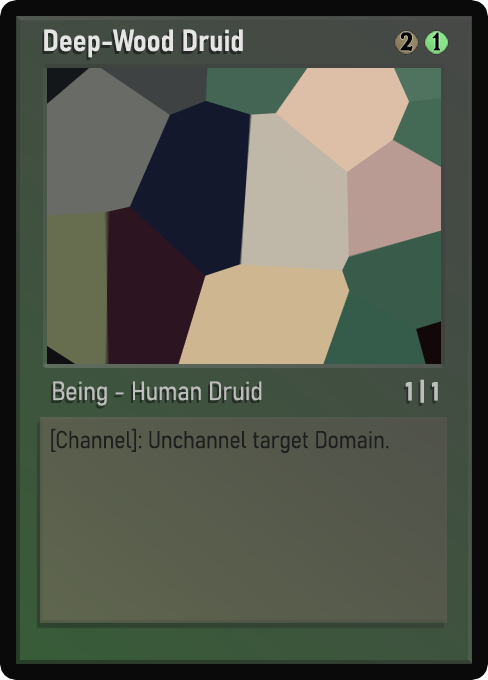
<style>
.page{position:relative;width:488px;height:680px}
.page>*{position:absolute;margin:0}
.t1{font:30px "Bahnschrift-SemiBoldSemiCondensed";color:#f2f2f2;font-weight:bold}
.t2{font:25px "WTRRoycroft";color:#000000;font-weight:bold;scale:1.09 1}
.t3{font:26px "Bahnschrift-LightSemiCondensed";color:#c8c8c8;font-weight:bold}
.t4{font:26px "Bahnschrift-BoldSemiCondensed";color:#bdbfbd;font-weight:bold}
.t5{font:24px "Bahnschrift-LightSemiCondensed";color:#1e1e1e;font-weight:bold}
</style>
<div class="page">
<p class="t1" style="left:44px;top:29px;width:199px;height:29px;opacity:0.9">Deep-Wood Druid</p>
<p class="t2" style="left:400px;top:32px;width:13px;height:19px">2</p>
<p class="t2" style="left:432px;top:32px;width:9px;height:19px">1</p>
<p class="t3" style="left:53px;top:381px;width:209px;height:25px;opacity:0.9">Being - Human Druid</p>
<p class="t4" style="left:405px;top:379px;width:33px;height:24px">1 | 1</p>
<p class="t5" style="left:51px;top:428px;width:338px;height:25px">[Channel]: Unchannel target Domain.</p>
</div>
